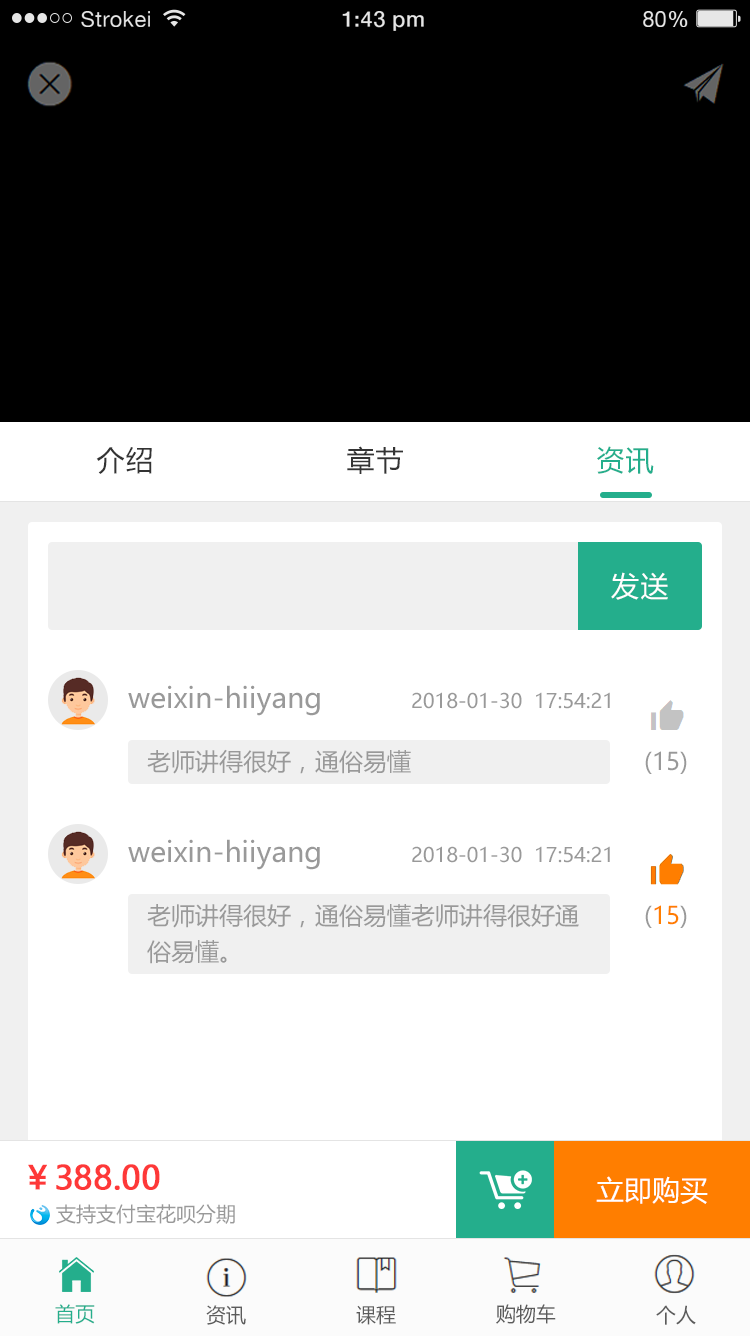
<style>
.page{position:relative;width:750px;height:1336px;background:#ffffff}
.page>*{position:absolute;margin:0}
.t1{font:21.8px "HelveticaNeue";letter-spacing:0.02em;color:#e6e6e6}
.t2{font:21.8px "HelveticaNeue-Medium";letter-spacing:0.02em;color:#e6e6e6}
.t3{font:28px "MicrosoftYaHei";letter-spacing:0.05em;color:#333333}
.t4{font:28px "MicrosoftYaHei";letter-spacing:0.05em;color:#24ae8c}
.t5{font:28px "MicrosoftYaHei";letter-spacing:0.05em;color:#ffffff}
.t6{font:28px "MicrosoftYaHei";color:#999999}
.t7{font:20px "MicrosoftYaHei";color:#999999}
.t8{font:24px "MicrosoftYaHei";color:#999999}
.t9{font:24px "MicrosoftYaHei";color:#ff7e00}
.t10{font:32px "MicrosoftYaHei";color:#fe3838;font-weight:bold}
.t11{font:28px "MicrosoftYaHei";color:#ffffff}
.t12{font:20px "MicrosoftYaHei";color:#24ae8c}
.t13{font:20px "MicrosoftYaHei";color:#5b5b5b}
</style>
<div class="page">
<p class="t1" style="left:81px;top:11px;width:69px;height:16px">Strokei</p>
<p class="t2" style="left:342px;top:11px;width:82px;height:20px">1:43 pm</p>
<p class="t1" style="left:643px;top:11px;width:45px;height:16px">80<span class="t2">%</span></p>
<p class="t3" style="left:96px;top:447px;width:56px;height:27px">介绍</p>
<p class="t3" style="left:347px;top:446px;width:56px;height:28px">章节</p>
<p class="t4" style="left:597px;top:446px;width:57px;height:28px">资讯</p>
<p class="t5" style="left:611px;top:572px;width:57px;height:28px">发送</p>
<p class="t6" style="left:128px;top:685px;width:192px;height:31px">weixin-hiiyang</p>
<p class="t7" style="left:412px;top:692px;width:198px;height:17px">2018-01-30  17:54:21</p>
<p class="t8" style="left:147px;top:749px;width:264px;height:25px">老师讲得很好，通俗易懂</p>
<p class="t8" style="left:645px;top:751px;width:42px;height:23px">(15)</p>
<p class="t6" style="left:128px;top:839px;width:192px;height:31px">weixin-hiiyang</p>
<p class="t7" style="left:412px;top:846px;width:198px;height:17px">2018-01-30  17:54:21</p>
<p class="t8" style="left:147px;top:903px;width:432px;height:25px">老师讲得很好，通俗易懂老师讲得很好通</p>
<p class="t9" style="left:645px;top:905px;width:42px;height:23px"><span class="t8">(</span>15<span class="t8">)</span></p>
<p class="t8" style="left:147px;top:940px;width:80px;height:24px">俗易懂。</p>
<p class="t10" style="left:28px;top:1164px;width:132px;height:26px">￥388.00</p>
<p class="t11" style="left:596px;top:1176px;width:112px;height:28px">立即购买</p>
<p class="t7" style="left:56px;top:1204px;width:179px;height:20px">支持支付宝花呗分期</p>
<p class="t12" style="left:55px;top:1304px;width:40px;height:20px">首页</p>
<p class="t13" style="left:206px;top:1305px;width:40px;height:20px">资讯</p>
<p class="t13" style="left:356px;top:1305px;width:40px;height:20px">课程</p>
<p class="t13" style="left:496px;top:1304px;width:60px;height:20px">购物车</p>
<p class="t13" style="left:656px;top:1305px;width:40px;height:20px">个人</p>
</div>
